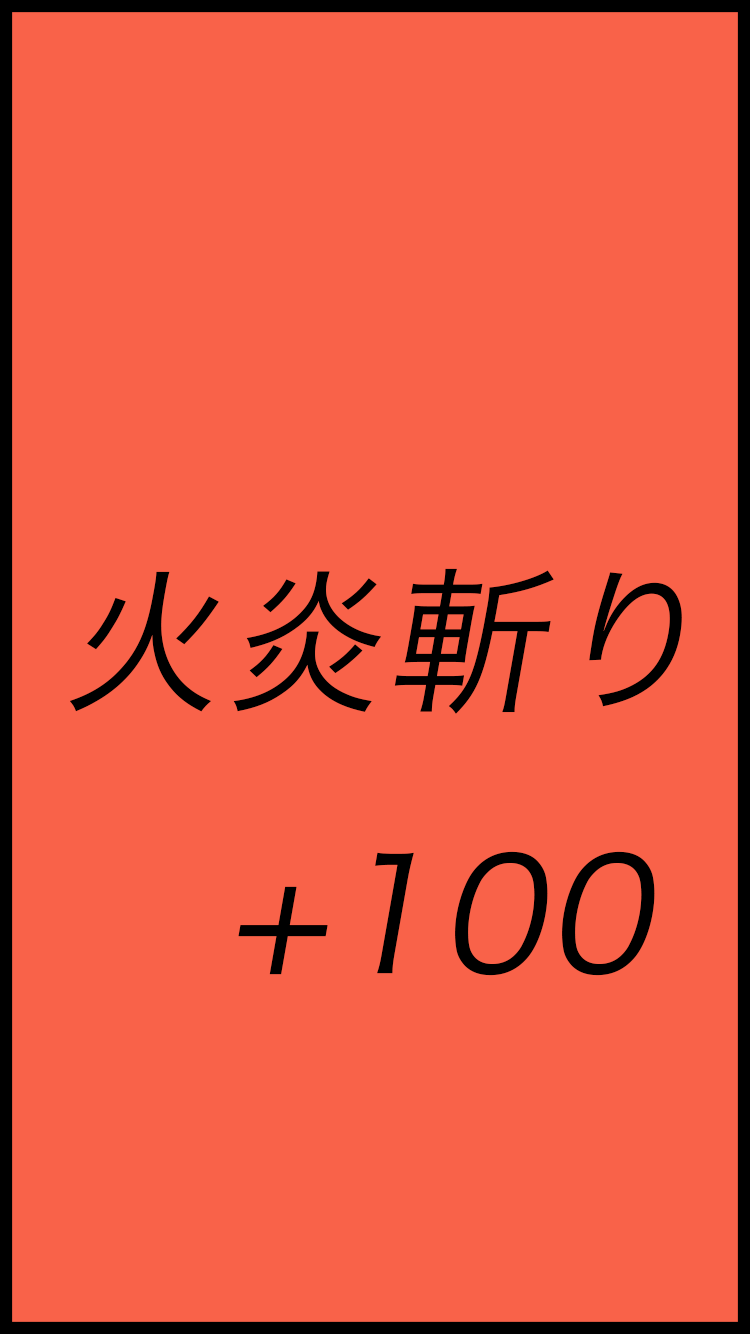
<style>
.page{position:relative;width:750px;height:1334px;background:#f96249}
.page>*{position:absolute;margin:0}
.t1{font:156.9px "HiraKakuPro-W3";color:#000000;font-weight:bold;font-style:italic}
</style>
<div class="page">
<p class="t1" style="left:69px;top:568px;width:613px;height:408px">火炎斬り<br>　+100</p>
</div>
